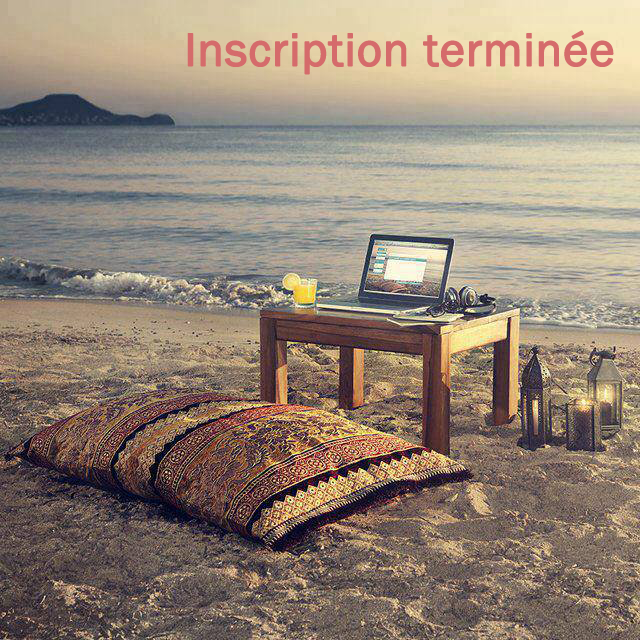
<style>
.page{position:relative;width:640px;height:640px}
.page>*{position:absolute;margin:0}
.t1{font:48px "FranklinGothic-Book";color:#d56b6b;font-weight:bold}
</style>
<div class="page">
<p class="t1" style="left:187px;top:30px;width:427px;height:45px">Inscription terminée</p>
</div>
